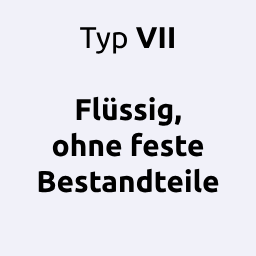
<style>
.page{position:relative;width:256px;height:256px;background:#f1f1f9}
.page>*{position:absolute;margin:0}
.t1{font:30px "Ubuntu-Bold";color:#000000}
.t2{font:30px "Ubuntu-Regular";color:#000000}
</style>
<div class="page">
<p class="t1" style="left:38px;top:27px;width:181px;height:166px;text-align:center"><span class="t2">Typ </span>VII<br><br>Flüssig,<br>ohne feste<br>Bestandteile</p>
</div>
